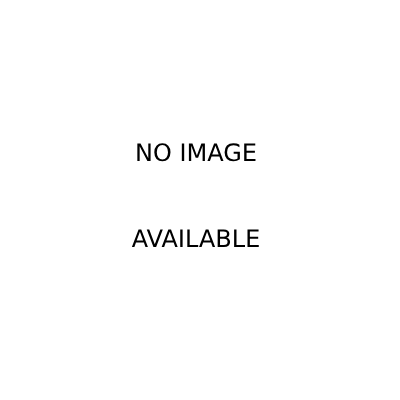
<style>
.page{position:relative;width:400px;height:400px;background:#ffffff}
.page>*{position:absolute;margin:0}
.t1{font:24px "DejaVuSans";color:#000000}
</style>
<div class="page">
<p class="t1" style="left:131px;top:143px;width:128px;height:104px;text-align:center">NO IMAGE<br><br><br>AVAILABLE</p>
</div>
